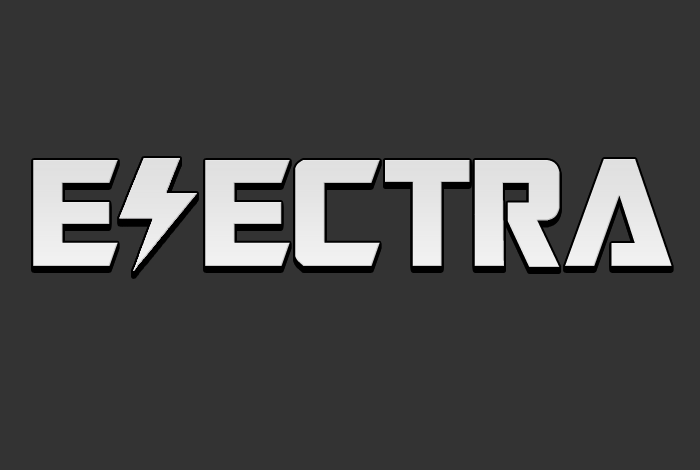
<style>
.page{position:relative;width:700px;height:470px;background:#333333}
.page>*{position:absolute;margin:0}
.t1{font:170px "TransformersMovie";color:#e7e7e7}
.t2{font:170px "TransformersMovie";color:#e6e6e6}
</style>
<div class="page">
<p class="t1" style="left:33px;top:161px;width:639px;height:108px">E ECTRA</p>
<p class="t1" style="left:33px;top:160px;width:639px;height:108px">E ECTRA</p>
<p class="t1" style="left:33px;top:159px;width:639px;height:108px">E ECTRA</p>
<p class="t2" style="left:33px;top:164px;width:639px;height:108px">E ECTRA</p>
<p class="t2" style="left:33px;top:163px;width:639px;height:108px">E ECTRA</p>
<p class="t2" style="left:33px;top:162px;width:639px;height:108px">E ECTRA</p>
</div>
